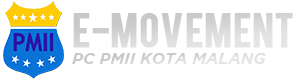
<style>
.page{position:relative;width:300px;height:80px;background:#ffffff}
.page>*{position:absolute;margin:0}
.t1{font:37.9px "Bebas";color:#d6d6d6;font-weight:bold}
.t2{font:16.1px "Gotham-BoldItalic";color:#d5d5d5}
</style>
<div class="page">
<p class="t1" style="left:73px;top:13px;width:220px;height:35px">E-MOVEMENT</p>
<p class="t2" style="left:72px;top:53px;width:194px;height:11px">PC PMII KOTA MALANG</p>
</div>
